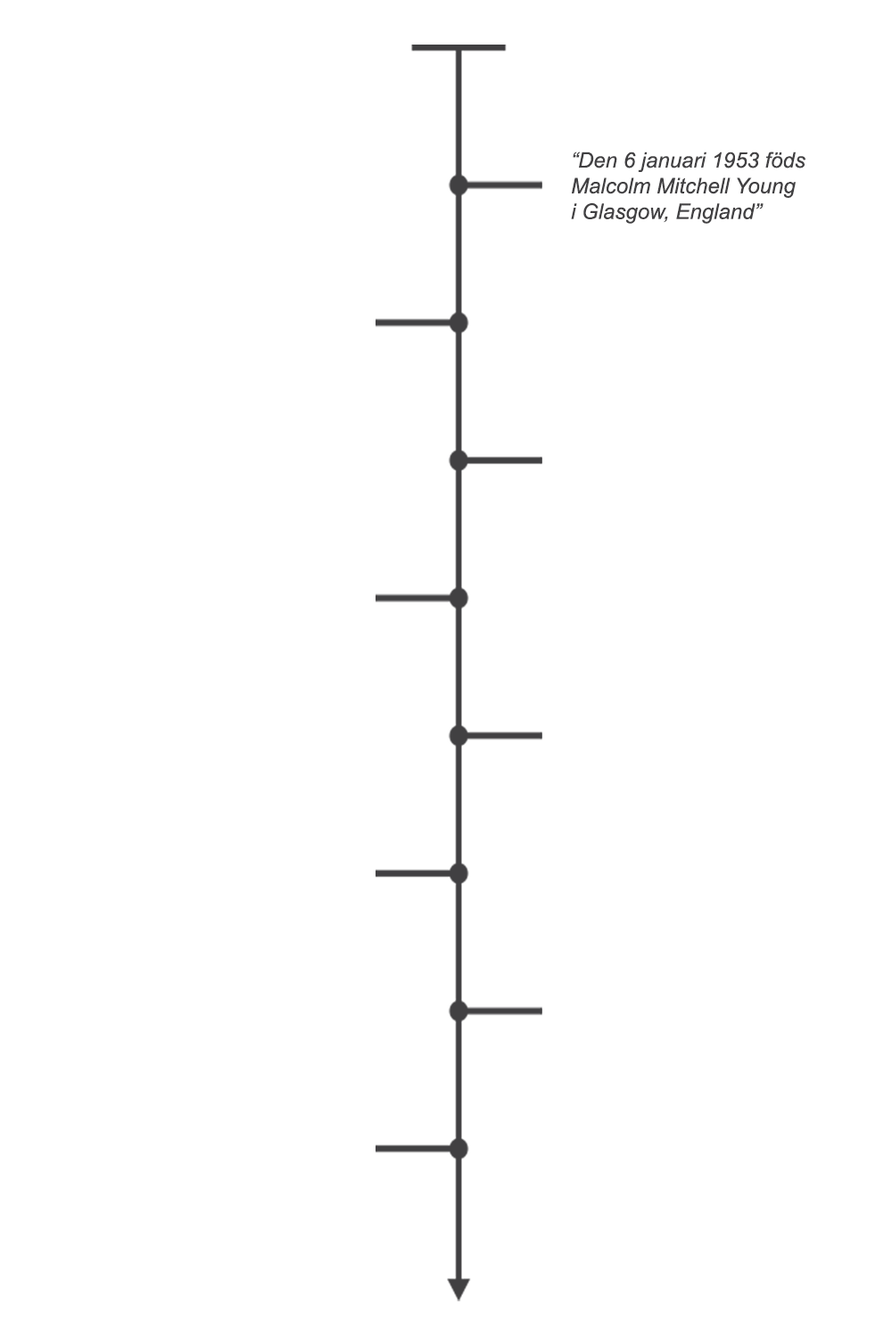
<style>
.page{position:relative;width:892px;height:1337px;background:#ffffff}
.page>*{position:absolute;margin:0}
.t1{font:21.4px "Arial-ItalicMT";color:#414042}
</style>
<div class="page">
<p class="t1" style="left:571px;top:152px;width:234px;height:72px">“Den 6 januari 1953 föds <br>Malcolm Mitchell Young<br>i Glasgow, England”</p>
</div>
